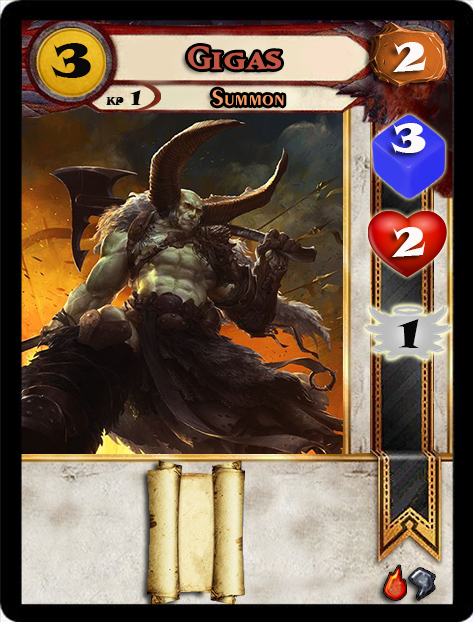
<style>
.page{position:relative;width:473px;height:622px}
.page>*{position:absolute;margin:0}
.t1{font:46.6px "SnapITC-Regular";color:#090909;scale:1.05 1}
.t2{font:40px "MatrixBoldSmallCaps";color:#c25443;scale:1.06 1}
.t3{font:40px "SnapITC-Regular";color:#fef9f9;scale:1.05 1}
.t4{font:22.7px "Exotic350BT-DemiBold";color:#f89c64;scale:1.06 1}
.t5{font:20.5px "SnapITC-Regular";color:#090909}
.t6{font:40px "SnapITC-Regular";color:#090909;scale:1.05 1}
</style>
<div class="page">
<p class="t1" style="left:51px;top:43px;width:40px;height:35px">3</p>
<p class="t2" style="left:188px;top:46px;width:93px;height:24px">Gigas</p>
<p class="t3" style="left:393px;top:42px;width:34px;height:30px">2</p>
<p class="t4" style="left:212px;top:89px;width:72px;height:17px">Summon</p>
<p class="t5" style="left:130px;top:90px;width:11px;height:15px">1</p>
<p class="t3" style="left:391px;top:123px;width:35px;height:30px">3</p>
<p class="t3" style="left:392px;top:227px;width:34px;height:30px">2</p>
<p class="t6" style="left:397px;top:319px;width:22px;height:29px">1</p>
</div>
